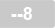
<style>
.page{position:relative;width:55px;height:28px;background:#c9c9c9}
.page>*{position:absolute;margin:0}
.t1{font:18.2px "Arial-BoldMT";color:#ffffff}
</style>
<div class="page">
<p class="t1" style="left:11px;top:7px;width:21px;height:13px">--8</p>
</div>
